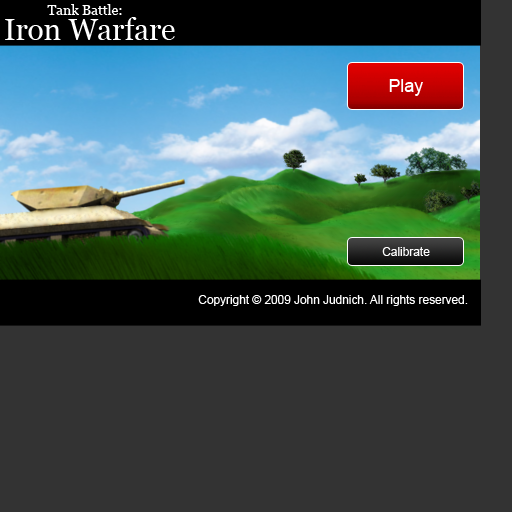
<style>
.page{position:relative;width:512px;height:512px;background:#333333}
.page>*{position:absolute;margin:0}
.t1{font:13.8px "Georgia";color:#ffffff}
.t2{font:29.6px "Georgia";color:#ffffff}
.t3{font:17.8px "ArialMT";color:#ffffff}
.t4{font:5.9px "Georgia";color:#000000}
.t5{font:11.9px "ArialMT";color:#ffffff}
</style>
<div class="page">
<p class="t1" style="left:47px;top:4px;width:75px;height:11px">Tank Battle:</p>
<p class="t2" style="left:5px;top:17px;width:170px;height:23px">Iron Warfare</p>
<p class="t3" style="left:389px;top:79px;width:34px;height:17px">Play</p>
<p class="t4" style="left:111px;top:197px;width:8px;height:6px;opacity:0.62">JL</p>
<p class="t5" style="left:382px;top:247px;width:48px;height:9px">Calibrate</p>
<p class="t5" style="left:198px;top:295px;width:270px;height:11px">Copyright © 2009 John Judnich. All rights reserved.</p>
</div>
